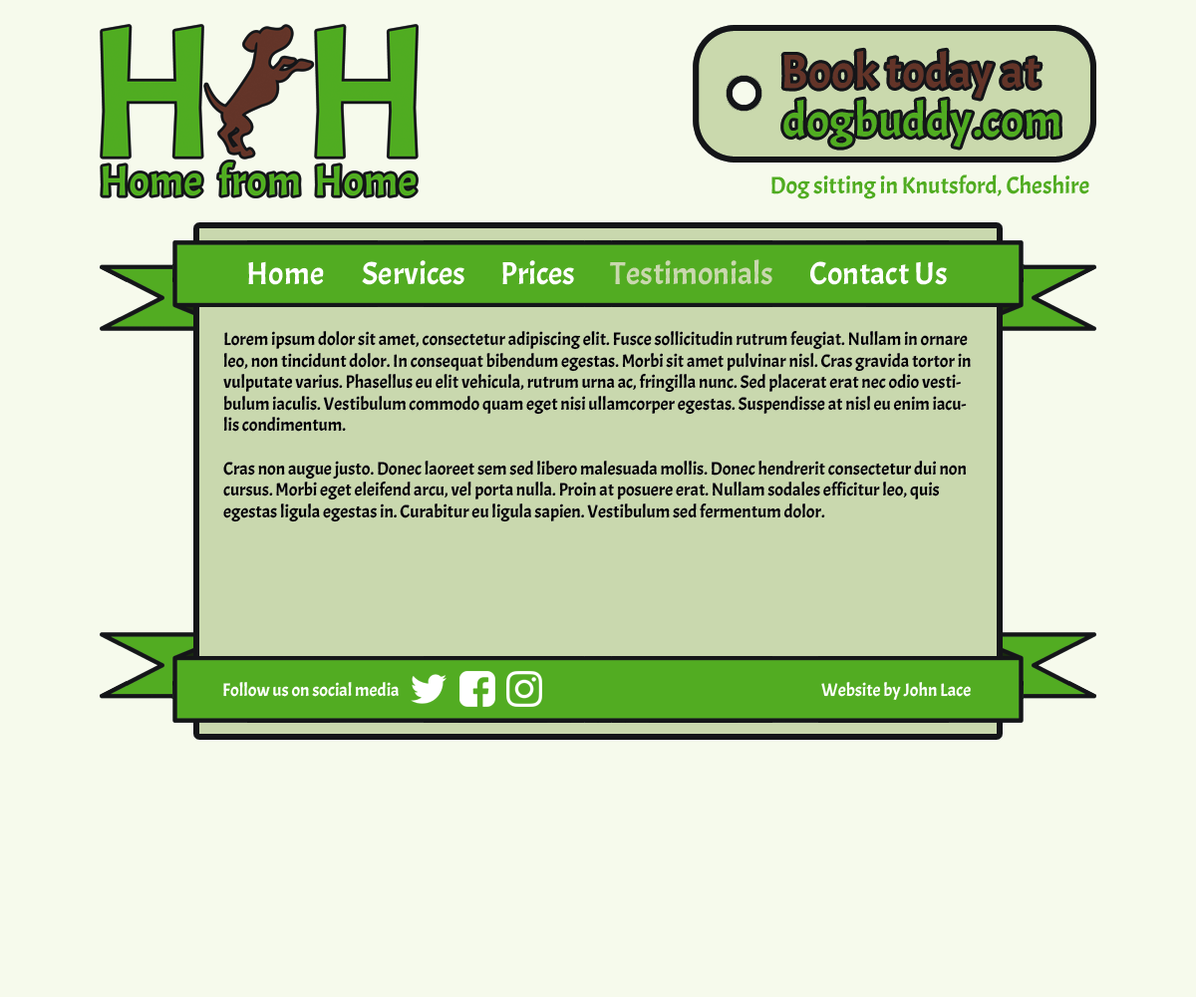
<style>
.page{position:relative;width:1196px;height:997px;background:#f6faec}
.page>*{position:absolute;margin:0}
.t1{font:47.8px "Acme-Regular";color:#633428}
.t2{font:47.8px "Acme-Regular";color:#50ac21}
.t3{font:23.9px "Acme-Regular";color:#50ac21}
.t4{font:31.9px "Acme-Regular";color:#ffffff}
.t5{font:31.9px "Acme-Regular";color:#c9d8ae}
.t6{font:17.9px "Acme-Regular";color:#000000}
.t7{font:17.9px "Acme-Regular";color:#ffffff}
</style>
<div class="page">
<p class="t1" style="left:784px;top:50px;width:257px;height:49px">Book today at</p>
<p class="t2" style="left:784px;top:99px;width:276px;height:49px">dogbuddy.com</p>
<p class="t3" style="left:772px;top:174px;width:318px;height:25px">Dog sitting in Knutsford, Cheshire</p>
<p class="t4" style="left:248px;top:261px;width:76px;height:24px">Home</p>
<p class="t4" style="left:362px;top:260px;width:103px;height:25px">Services</p>
<p class="t4" style="left:502px;top:260px;width:72px;height:25px">Prices</p>
<p class="t5" style="left:610px;top:259px;width:163px;height:26px">Testimonials</p>
<p class="t4" style="left:810px;top:261px;width:137px;height:24px">Contact Us</p>
<p class="t6" style="left:223px;top:331px;width:748px;height:191px">Lorem ipsum dolor sit amet, consectetur adipiscing elit. Fusce sollicitudin rutrum feugiat. Nullam in ornare leo, non tincidunt dolor. In consequat bibendum egestas. Morbi sit amet pulvinar nisl. Cras gravida tortor in vulputate varius. Phasellus eu elit vehicula, rutrum urna ac, fringilla nunc. Sed placerat erat nec odio vestibulum iaculis. Vestibulum commodo quam eget nisi ullamcorper egestas. Suspendisse at nisl eu enim iaculis condimentum.<br><br>Cras non augue justo. Donec laoreet sem sed libero malesuada mollis. Donec hendrerit consectetur dui non cursus. Morbi eget eleifend arcu, vel porta nulla. Proin at posuere erat. Nullam sodales efficitur leo, quis egestas ligula egestas in. Curabitur eu ligula sapien. Vestibulum sed fermentum dolor.</p>
<p class="t7" style="left:223px;top:682px;width:176px;height:15px">Follow us on social media</p>
<p class="t7" style="left:821px;top:682px;width:150px;height:18px">Website by John Lace</p>
</div>
